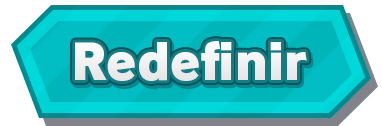
<style>
.page{position:relative;width:382px;height:126px}
.page>*{position:absolute;margin:0}
.t1{font:48.1px "RodinPro-UB";letter-spacing:-0.005em;color:#f1f1f1}
</style>
<div class="page">
<p class="t1" style="left:75px;top:41px;width:232px;height:40px">Redefinir</p>
</div>
